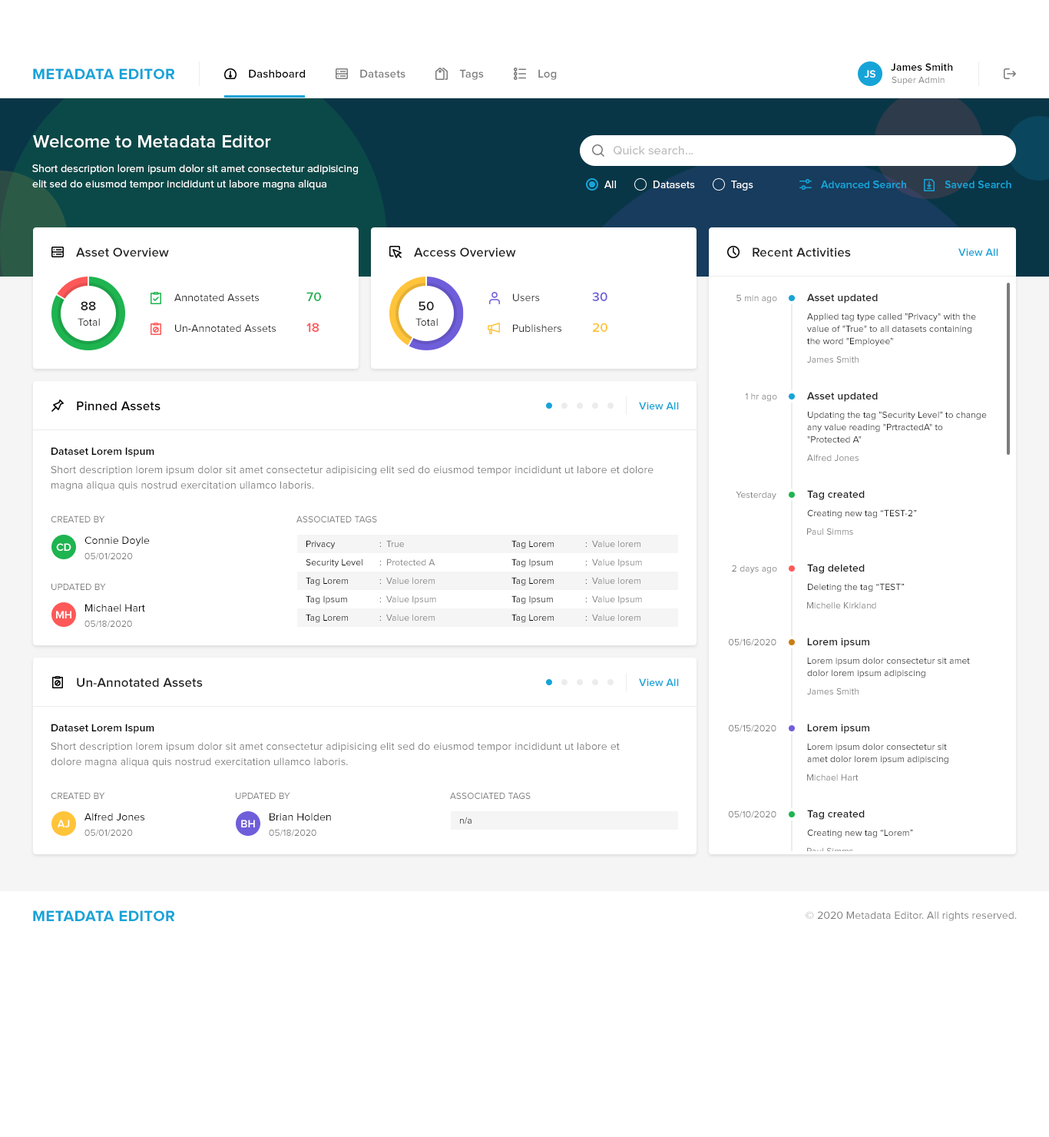
<style>
.page{position:relative;width:1049px;height:1137px;background:#ffffff}
.page>*{position:absolute;margin:0}
.t1{font:10.8px "ProximaNova-Semibold";letter-spacing:0.01em;color:#000000}
.t2{font:15.4px "ProximaNova-Bold";letter-spacing:0.025em;color:#16a4d8;text-transform:uppercase}
.t3{font:11.5px "ProximaNova-Semibold";letter-spacing:0.01em;color:#000000}
.t4{font:11.5px "ProximaNova-Semibold";letter-spacing:0.01em;color:#7c7c7c}
.t5{font:10.8px "ProximaNova-Semibold";letter-spacing:0.01em;color:#ffffff}
.t6{font:9.2px "ProximaNova-Regular";letter-spacing:0.01em;color:#7c7c7c}
.t7{font:18.4px "ProximaNova-Semibold";letter-spacing:0.01em;color:#ffffff}
.t8{font:12.3px "ProximaNova-Regular";letter-spacing:0.01em;color:#bcbcbc}
.t9{font:10.8px/15.4px "ProximaNova-Regular";letter-spacing:0.01em;color:#ffffff}
.t10{font:10.8px "ProximaNova-Regular";letter-spacing:0.01em;color:#ffffff}
.t11{font:10.8px "ProximaNova-Semibold";letter-spacing:0.01em;color:#16a4d8}
.t12{font:13.1px "ProximaNova-Semibold";letter-spacing:0.01em;color:#212121}
.t13{font:10.8px/30.7px "ProximaNova-Regular";letter-spacing:0.01em;color:#212121}
.t14{font:13.1px/30.7px "ProximaNova-Semibold";letter-spacing:0.01em;color:#1eb450}
.t15{font:13.1px/30.7px "ProximaNova-Semibold";letter-spacing:0.01em;color:#ff5858}
.t16{font:13.1px/30.7px "ProximaNova-Semibold";letter-spacing:0.01em;color:#6f5eda}
.t17{font:13.1px/30.7px "ProximaNova-Semibold";letter-spacing:0.01em;color:#ffc43a}
.t18{font:10.8px "ProximaNova-Semibold";letter-spacing:0.01em;color:#212121}
.t19{font:10.8px "ProximaNova-Regular";letter-spacing:0.01em;color:#212121}
.t20{font:9.2px/12.3px "ProximaNova-Regular";letter-spacing:0.01em;color:#212121}
.t21{font:13.1px "ProximaNova-Semibold";letter-spacing:0.01em;color:#000000}
.t22{font:10.8px/15.4px "ProximaNova-Regular";letter-spacing:0.01em;color:#7c7c7c}
.t23{font:9.2px "ProximaNova-Regular";letter-spacing:0.01em;color:#212121}
.t24{font:9.2px "ProximaNova-Regular";letter-spacing:0.01em;color:#7c7c7c;text-transform:uppercase}
.t25{font:10.8px "ProximaNova-Semibold";letter-spacing:0.01em;color:#ffffff;text-transform:uppercase}
.t26{font:10.8px "ProximaNova-Regular";letter-spacing:0.01em;color:#000000}
.t27{font:9.2px/18.4px "ProximaNova-Regular";letter-spacing:0.01em;color:#000000}
.t28{font:9.2px/18.4px "ProximaNova-Regular";letter-spacing:0.01em}
.t29{font:9.2px/18.4px "ProximaNova-Regular";letter-spacing:0.01em;color:#7c7c7c}
.t30{font:9.2px "ProximaNova-Regular";letter-spacing:0.01em}
.t31{font:10.8px "ProximaNova-Regular";letter-spacing:0.01em;color:#7c7c7c}
</style>
<div class="page">
<p class="t1" style="left:891px;top:63px;width:62px;height:8px">James Smith</p>
<p class="t2" style="left:33px;top:68px;width:141px;height:11px">Metadata Editor</p>
<p class="t3" style="left:249px;top:69px;width:56px;height:9px">Dashboard</p>
<p class="t4" style="left:360px;top:69px;width:46px;height:9px">Datasets</p>
<p class="t4" style="left:459px;top:69px;width:25px;height:11px">Tags</p>
<p class="t4" style="left:538px;top:69px;width:19px;height:11px">Log</p>
<p class="t5" style="left:864px;top:70px;width:12px;height:8px">JS</p>
<p class="t6" style="left:892px;top:76px;width:53px;height:9px">Super Admin</p>
<p class="t7" style="left:33px;top:135px;width:238px;height:12px">Welcome to Metadata Editor</p>
<p class="t8" style="left:614px;top:146px;width:79px;height:9px">Quick search...</p>
<p class="t9" style="left:32px;top:164px;width:326px;height:26px">Short description lorem ipsum dolor sit amet consectetur adipisicing <br>elit sed do eiusmod tempor incididunt ut labore magna aliqua</p>
<p class="t10" style="left:604px;top:180px;width:12px;height:8px">All</p>
<p class="t10" style="left:654px;top:180px;width:41px;height:8px">Datasets</p>
<p class="t10" style="left:731px;top:180px;width:22px;height:10px">Tags</p>
<p class="t11" style="left:821px;top:180px;width:85px;height:8px">Advanced Search</p>
<p class="t11" style="left:945px;top:180px;width:66px;height:8px">Saved Search</p>
<p class="t12" style="left:76px;top:247px;width:93px;height:10px">Asset Overview</p>
<p class="t12" style="left:414px;top:247px;width:102px;height:10px">Access Overview</p>
<p class="t12" style="left:753px;top:247px;width:98px;height:10px">Recent Activities</p>
<p class="t11" style="left:958px;top:248px;width:40px;height:8px">View All</p>
<p class="t13" style="left:174px;top:293px;width:102px;height:39px">Annotated Assets<br>Un-Annotated Assets</p>
<p class="t14" style="left:306px;top:292px;width:15px;height:40px">70<br><span class="t15">18</span></p>
<p class="t13" style="left:513px;top:293px;width:48px;height:39px">Users<br>Publishers</p>
<p class="t16" style="left:592px;top:292px;width:15px;height:40px">30<br><span class="t17">20</span></p>
<p class="t18" style="left:807px;top:293px;width:71px;height:10px">Asset updated</p>
<p class="t12" style="left:81px;top:301px;width:15px;height:9px">88</p>
<p class="t12" style="left:419px;top:301px;width:15px;height:9px">50</p>
<p class="t6" style="left:737px;top:294px;width:40px;height:9px">5 min ago</p>
<p class="t19" style="left:78px;top:318px;width:22px;height:8px">Total</p>
<p class="t19" style="left:415px;top:318px;width:23px;height:8px">Total</p>
<p class="t20" style="left:807px;top:313px;width:169px;height:33px">Applied tag type called "Privacy" with the <br>value of "True" to all datasets containing <br>the word "Employee"</p>
<p class="t6" style="left:807px;top:356px;width:52px;height:6px">James Smith</p>
<p class="t21" style="left:77px;top:401px;width:84px;height:9px">Pinned Assets</p>
<p class="t11" style="left:639px;top:402px;width:40px;height:7px">View All</p>
<p class="t6" style="left:745px;top:392px;width:32px;height:10px">1 hr ago</p>
<p class="t18" style="left:807px;top:392px;width:71px;height:10px">Asset updated</p>
<p class="t20" style="left:807px;top:411px;width:180px;height:31px">Updating the tag "Security Level" to change <br>any value reading "PrtractedA" to <br>"Protected A"</p>
<p class="t1" style="left:51px;top:447px;width:103px;height:10px">Dataset Lorem Ispum</p>
<p class="t6" style="left:807px;top:454px;width:52px;height:7px">Alfred Jones</p>
<p class="t22" style="left:51px;top:465px;width:603px;height:26px">Short description lorem ipsum dolor sit amet consectetur adipisicing elit sed do eiusmod tempor incididunt ut labore et dolore <br>magna aliqua quis nostrud exercitation ullamco laboris.</p>
<p class="t6" style="left:736px;top:491px;width:40px;height:9px">Yesterday</p>
<p class="t18" style="left:807px;top:490px;width:58px;height:10px">Tag created</p>
<p class="t23" style="left:807px;top:509px;width:110px;height:9px">Creating new tag “TEST-2”</p>
<p class="t24" style="left:51px;top:515px;width:54px;height:7px">Created by</p>
<p class="t24" style="left:296px;top:515px;width:81px;height:7px">Associated tags</p>
<p class="t6" style="left:807px;top:528px;width:46px;height:7px">Paul Simms</p>
<p class="t25" style="left:56px;top:543px;width:15px;height:8px">cd</p>
<p class="t26" style="left:84px;top:536px;width:66px;height:10px">Connie Doyle</p>
<p class="t27" style="left:306px;top:540px;width:56px;height:83px">Privacy<br>Security Level<br>Tag Lorem<br>Tag Ipsum<br>Tag Lorem</p>
<p class="t28" style="left:379px;top:542px;width:2px;height:79px">:<br>:<br>:<br>:<br>:</p>
<p class="t29" style="left:386px;top:540px;width:50px;height:81px">True<br>Protected A<br>Value lorem<br>Value Ipsum<br>Value lorem</p>
<p class="t27" style="left:511px;top:540px;width:43px;height:83px">Tag Lorem<br>Tag Ipsum<br>Tag Lorem<br>Tag Ipsum<br>Tag Lorem</p>
<p class="t28" style="left:585px;top:542px;width:2px;height:79px">:<br>:<br>:<br>:<br>:</p>
<p class="t29" style="left:592px;top:540px;width:50px;height:81px">Value lorem<br>Value Ipsum<br>Value lorem<br>Value Ipsum<br>Value lorem</p>
<p class="t6" style="left:84px;top:552px;width:49px;height:8px">05/01/2020</p>
<p class="t6" style="left:732px;top:564px;width:45px;height:10px">2 days ago</p>
<p class="t18" style="left:807px;top:564px;width:58px;height:10px">Tag deleted</p>
<p class="t24" style="left:51px;top:583px;width:55px;height:7px">Updated by</p>
<p class="t23" style="left:808px;top:583px;width:97px;height:9px">Deleting the tag “TEST”</p>
<p class="t26" style="left:85px;top:604px;width:60px;height:7px">Michael Hart</p>
<p class="t6" style="left:807px;top:601px;width:69px;height:7px">Michelle Kirkland</p>
<p class="t25" style="left:56px;top:611px;width:15px;height:7px">mh</p>
<p class="t6" style="left:84px;top:620px;width:48px;height:7px">05/18/2020</p>
<p class="t6" style="left:729px;top:638px;width:47px;height:8px">05/16/2020</p>
<p class="t18" style="left:807px;top:637px;width:62px;height:10px">Lorem ipsum</p>
<p class="t20" style="left:807px;top:657px;width:163px;height:21px">Lorem ipsum dolor consectetur sit amet <br>dolor lorem ipsum adipiscing</p>
<p class="t12" style="left:77px;top:677px;width:126px;height:10px">Un-Annotated Assets</p>
<p class="t11" style="left:639px;top:678px;width:40px;height:8px">View All</p>
<p class="t6" style="left:807px;top:687px;width:52px;height:7px">James Smith</p>
<p class="t1" style="left:51px;top:723px;width:103px;height:10px">Dataset Lorem Ispum</p>
<p class="t6" style="left:729px;top:724px;width:47px;height:8px">05/15/2020</p>
<p class="t18" style="left:807px;top:723px;width:62px;height:10px">Lorem ipsum</p>
<p class="t22" style="left:51px;top:742px;width:569px;height:25px">Short description lorem ipsum dolor sit amet consectetur adipisicing elit sed do eiusmod tempor incididunt ut labore et <br>dolore magna aliqua quis nostrud exercitation ullamco laboris.</p>
<p class="t20" style="left:807px;top:743px;width:141px;height:21px">Lorem ipsum dolor consectetur sit <br>amet dolor lorem ipsum adipiscing</p>
<p class="t6" style="left:807px;top:773px;width:52px;height:7px">Michael Hart</p>
<p class="t24" style="left:51px;top:792px;width:54px;height:7px">Created by</p>
<p class="t24" style="left:236px;top:792px;width:54px;height:7px">Updated by</p>
<p class="t24" style="left:450px;top:792px;width:81px;height:7px">Associated tags</p>
<p class="t18" style="left:807px;top:809px;width:58px;height:10px">Tag created</p>
<p class="t25" style="left:57px;top:819px;width:13px;height:8px">aj</p>
<p class="t26" style="left:84px;top:813px;width:60px;height:7px">Alfred Jones</p>
<p class="t25" style="left:241px;top:819px;width:14px;height:8px">bh</p>
<p class="t26" style="left:270px;top:813px;width:61px;height:7px">Brian Holden</p>
<p class="t30" style="left:460px;top:816px;width:12px;height:8px">n/a</p>
<p class="t6" style="left:728px;top:810px;width:48px;height:8px">05/10/2020</p>
<p class="t6" style="left:84px;top:829px;width:49px;height:7px">05/01/2020</p>
<p class="t6" style="left:269px;top:829px;width:47px;height:7px">05/18/2020</p>
<p class="t23" style="left:807px;top:829px;width:106px;height:9px">Creating new tag “Lorem”</p>
<p class="t30" style="left:807px;top:847px;width:46px;height:7px">Paul Simms</p>
<p class="t2" style="left:33px;top:910px;width:141px;height:11px">Metadata Editor</p>
<p class="t31" style="left:806px;top:911px;width:211px;height:10px">© 2020 Metadata Editor. All rights reserved.</p>
</div>
